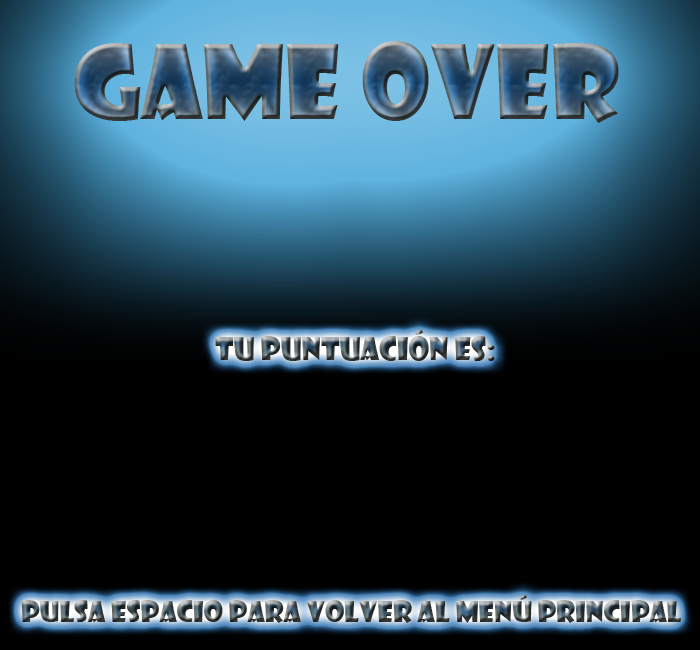
<style>
.page{position:relative;width:700px;height:650px;background:#000000}
.page>*{position:absolute;margin:0}
.t1{font:100px "ShowcardGothic-Reg"}
.t2{font:30px "ShowcardGothic-Reg"}
.t3{font:28px "ShowcardGothic-Reg"}
</style>
<div class="page">
<p class="t1" style="left:74px;top:41px;width:545px;height:82px">Game Over</p>
<p class="t2" style="left:215px;top:329px;width:280px;height:32px">Tu puntuación es:</p>
<p class="t3" style="left:21px;top:594px;width:661px;height:29px">PULSA ESPACIO PARA VOLVER AL MENÚ PRINCIPAL</p>
</div>
